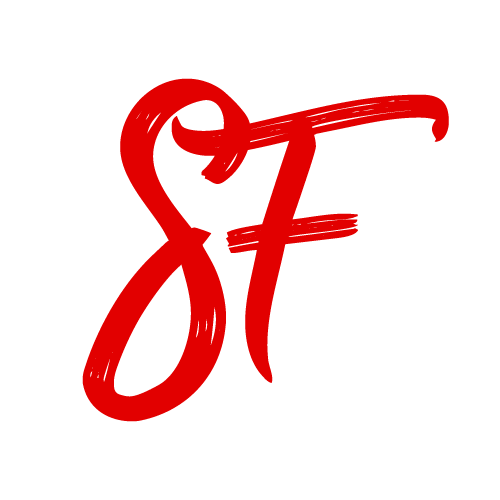
<style>
.page{position:relative;width:500px;height:500px;background:#ffffff}
.page>*{position:absolute;margin:0}
.t1{font:381px "BillyOhio";letter-spacing:-0.18em;color:#e20000}
</style>
<div class="page">
<p class="t1" style="left:82px;top:78px;width:367px;height:344px">SF</p>
</div>
